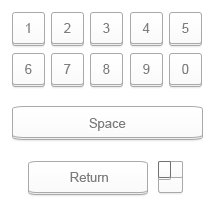
<style>
.page{position:relative;width:214px;height:212px;background:#ffffff}
.page>*{position:absolute;margin:0}
.t1{font:13px "ArialMT";color:#7c7c7c}
</style>
<div class="page">
<p class="t1" style="left:26px;top:23px;width:4px;height:10px">1</p>
<p class="t1" style="left:64px;top:23px;width:7px;height:10px">2</p>
<p class="t1" style="left:103px;top:23px;width:7px;height:10px">3</p>
<p class="t1" style="left:142px;top:23px;width:8px;height:10px">4</p>
<p class="t1" style="left:182px;top:23px;width:7px;height:10px">5</p>
<p class="t1" style="left:25px;top:64px;width:7px;height:10px">6</p>
<p class="t1" style="left:64px;top:64px;width:7px;height:10px">7</p>
<p class="t1" style="left:103px;top:64px;width:7px;height:10px">8</p>
<p class="t1" style="left:143px;top:64px;width:7px;height:10px">9</p>
<p class="t1" style="left:182px;top:64px;width:7px;height:10px">0</p>
<p class="t1" style="left:89px;top:118px;width:37px;height:13px">Space</p>
<p class="t1" style="left:70px;top:172px;width:38px;height:10px">Return</p>
</div>
